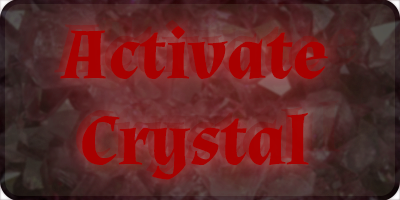
<style>
.page{position:relative;width:400px;height:200px}
.page>*{position:absolute;margin:0}
.t1{font:72px "Almendra-Bold"}
.t2{font:72px "Almendra-Bold";color:#aa0000}
</style>
<div class="page">
<p class="t1" style="left:54px;top:20px;width:268px;height:154px;text-align:center">Activate<br>Crystal</p>
<p class="t2" style="left:60px;top:26px;width:268px;height:154px;text-align:center;opacity:0.95">Activate<br>Crystal</p>
</div>
